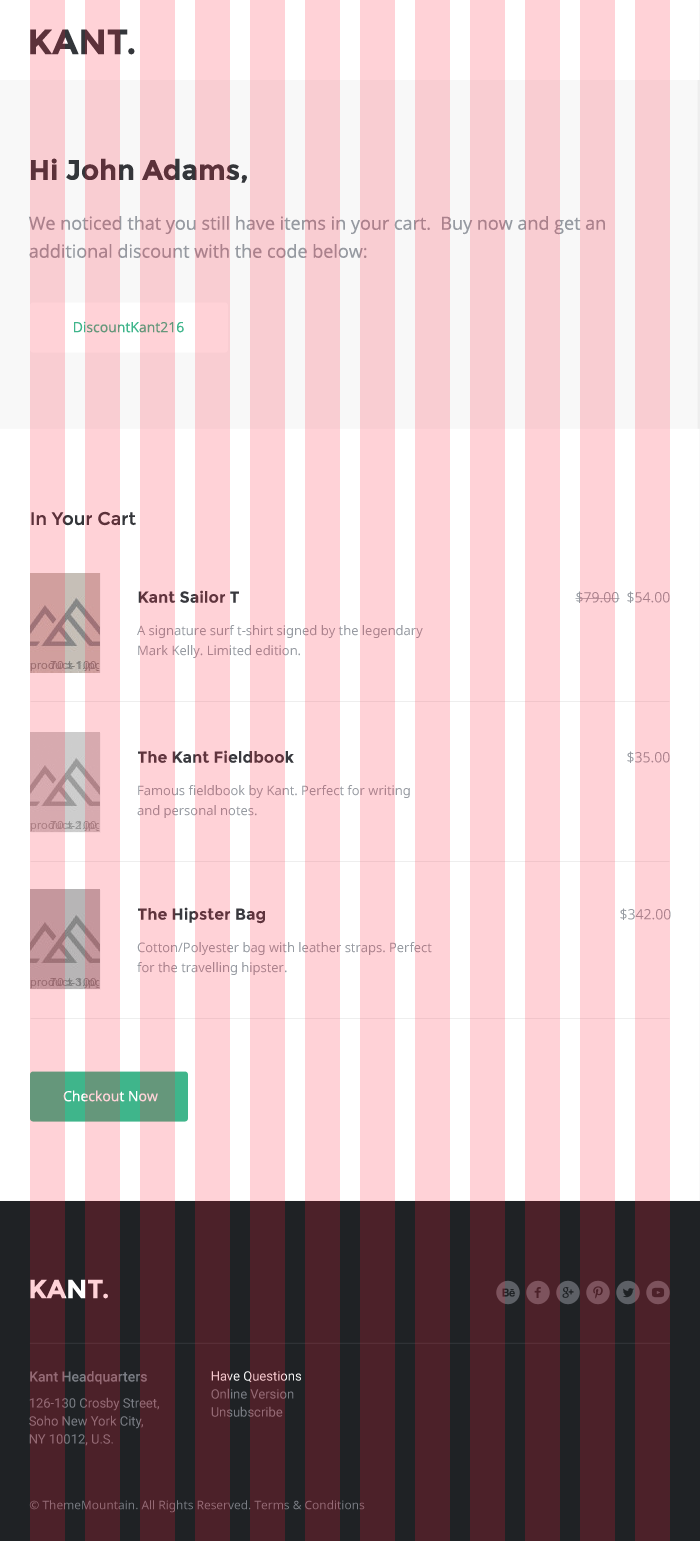
<style>
.page{position:relative;width:700px;height:1541px;background:#ffd2d7}
.page>*{position:absolute;margin:0}
.t1{font:35px "Montserrat-Bold";color:#5c313a}
.t2{font:28px "Montserrat-Bold"}
.t3{font:18px/28px "OpenSans"}
.t4{font:14px "OpenSans"}
.t5{font:18px "Montserrat-Regular"}
.t6{font:16px "Montserrat-Bold";color:#60343d}
.t7{font:13px/20px "OpenSans"}
.t8{font:16px "Montserrat-Bold"}
.t9{font:26px "Montserrat-Bold"}
.t10{font:14px "Roboto-Medium";color:#956a75}
.t11{font:13px/18px "Roboto-Regular"}
.t12{font:13px/18px "Roboto-Regular";color:#956a75}
.t13{font:12px "OpenSans";color:#956a75}
</style>
<div class="page">
<p class="t1" style="left:30px;top:29px;width:105px;height:26px">KANT.</p>
<p class="t2" style="left:31px;top:158px;width:216px;height:25px">Hi John Adams,</p>
<p class="t3" style="left:28px;top:216px;width:577px;height:42px">We noticed that you still have items in your cart.  Buy now and get an additional discount with the code below:</p>
<p class="t4" style="left:74px;top:321px;width:110px;height:12px">DiscountKant216</p>
<p class="t5" style="left:31px;top:511px;width:105px;height:15px">In Your Cart</p>
<p class="t6" style="left:138px;top:590px;width:101px;height:13px">Kant Sailor T</p>
<p class="t4" style="left:575px;top:591px;width:95px;height:12px">$79.00  $54.00</p>
<p class="t7" style="left:137px;top:625px;width:286px;height:33px;text-align:justify">A signature surf t-shirt signed by the legendary<br>Mark Kelly. Limited edition.</p>
<p class="t8" style="left:138px;top:750px;width:156px;height:13px">The Kant Fieldbook</p>
<p class="t4" style="left:627px;top:751px;width:43px;height:12px">$35.00</p>
<p class="t7" style="left:137px;top:785px;width:273px;height:33px;text-align:justify">Famous fieldbook by Kant. Perfect for writing<br>and personal notes.</p>
<p class="t8" style="left:138px;top:907px;width:127px;height:17px">The Hipster Bag</p>
<p class="t4" style="left:620px;top:908px;width:51px;height:12px">$342.00</p>
<p class="t7" style="left:137px;top:942px;width:295px;height:33px;text-align:justify">Cotton/Polyester bag with leather straps. Perfect<br>for the travelling hipster.</p>
<p class="t4" style="left:63px;top:1090px;width:95px;height:12px">Checkout Now</p>
<p class="t9" style="left:30px;top:1279px;width:78px;height:20px">KANT.</p>
<p class="t10" style="left:30px;top:1371px;width:117px;height:14px">Kant Headquarters</p>
<p class="t11" style="left:211px;top:1371px;width:90px;height:46px">Have Questions<br>Online Version<br>Unsubscribe</p>
<p class="t12" style="left:29px;top:1397px;width:130px;height:49px">126-130 Crosby Street,<br>Soho New York City,<br>NY 10012, U.S.</p>
<p class="t13" style="left:29px;top:1500px;width:336px;height:13px">© ThemeMountain. All Rights Reserved. Terms &amp; Conditions</p>
</div>
